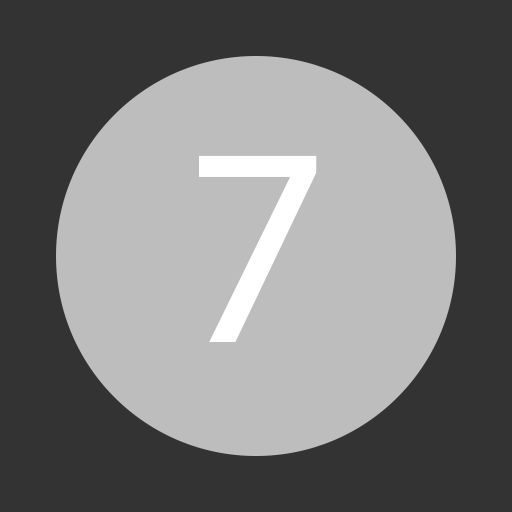
<style>
.page{position:relative;width:512px;height:512px;background:#333333}
.page>*{position:absolute;margin:0}
.t1{font:286px "MyriadPro-Regular";color:#ffffff}
</style>
<div class="page">
<p class="t1" style="left:199px;top:155px;width:118px;height:187px">7</p>
</div>
